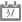
<style>
.page{position:relative;width:22px;height:22px;background:#ffffff}
.page>*{position:absolute;margin:0}
.t1{font:10.3px "-";color:#7f7f7f}
</style>
<div class="page">
<p class="t1" style="left:6px;top:8px;width:9px;height:9px">31</p>
</div>
